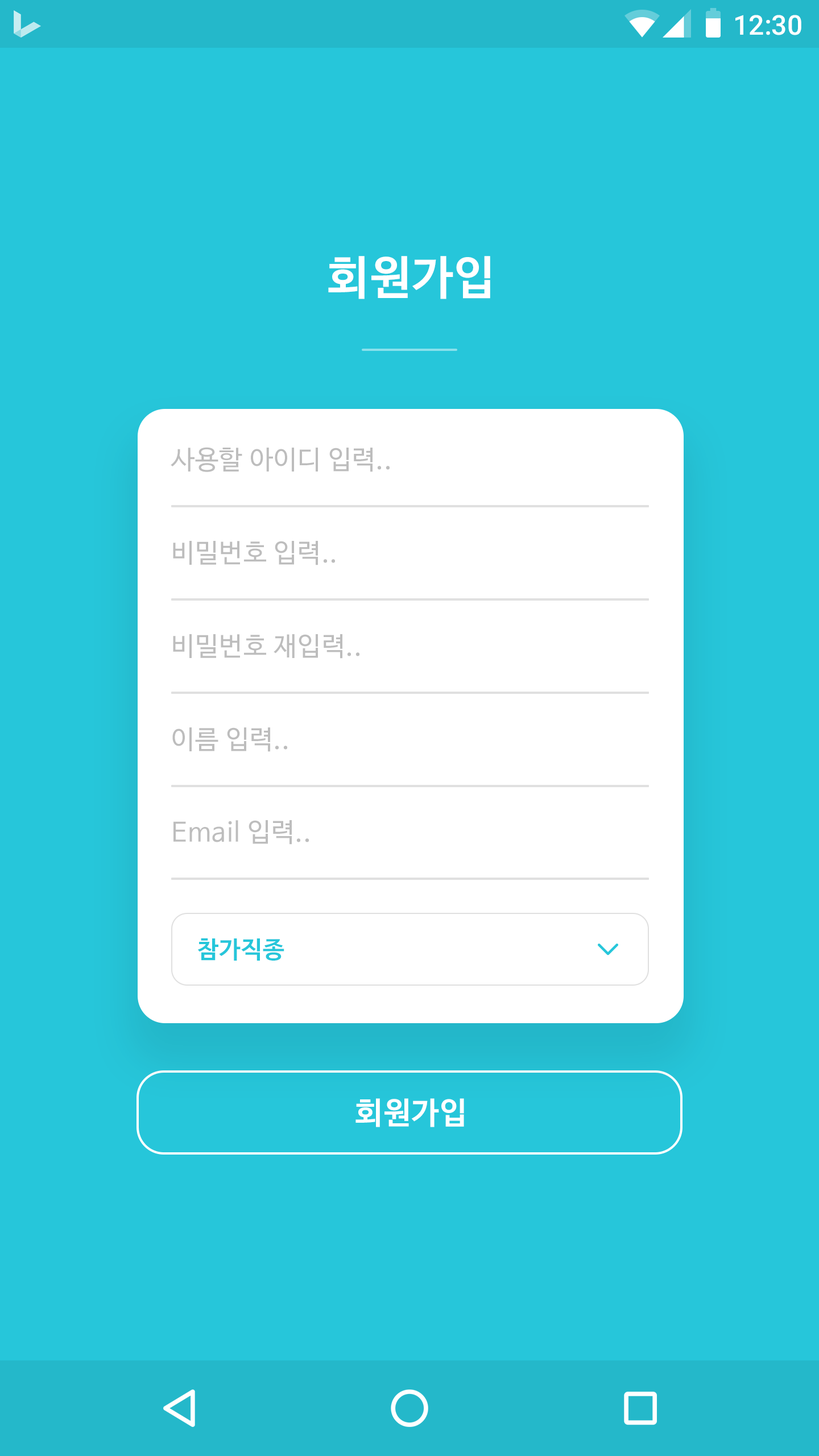
<style>
.page{position:relative;width:819px;height:1456px;background:#26c6da}
.page>*{position:absolute;margin:0}
.t1{font:27.3px "Roboto-Medium";color:#ffffff}
.t2{font:46.1px "NanumBarunGothicBold";letter-spacing:0.025em;color:#ffffff}
.t3{font:26.2px "NanumBarunGothic";letter-spacing:0.025em;color:#bdbdbd}
.t4{font:23.9px "NanumBarunGothicBold";letter-spacing:0.025em;color:#26c6da}
.t5{font:30.7px "NanumBarunGothicBold";letter-spacing:0.025em;color:#ffffff}
</style>
<div class="page">
<p class="t1" style="left:735px;top:15px;width:66px;height:20px">12:30</p>
<p class="t2" style="left:328px;top:256px;width:162px;height:43px">회원가입</p>
<p class="t3" style="left:171px;top:447px;width:219px;height:25px">사용할 아이디 입력..</p>
<p class="t3" style="left:173px;top:541px;width:162px;height:24px">비밀번호 입력..</p>
<p class="t3" style="left:173px;top:634px;width:186px;height:25px">비밀번호 재입력..</p>
<p class="t3" style="left:172px;top:727px;width:115px;height:25px">이름 입력..</p>
<p class="t3" style="left:173px;top:820px;width:136px;height:25px">Email 입력..</p>
<p class="t4" style="left:198px;top:938px;width:86px;height:23px">참가직종</p>
<p class="t5" style="left:355px;top:1098px;width:109px;height:29px">회원가입</p>
</div>
